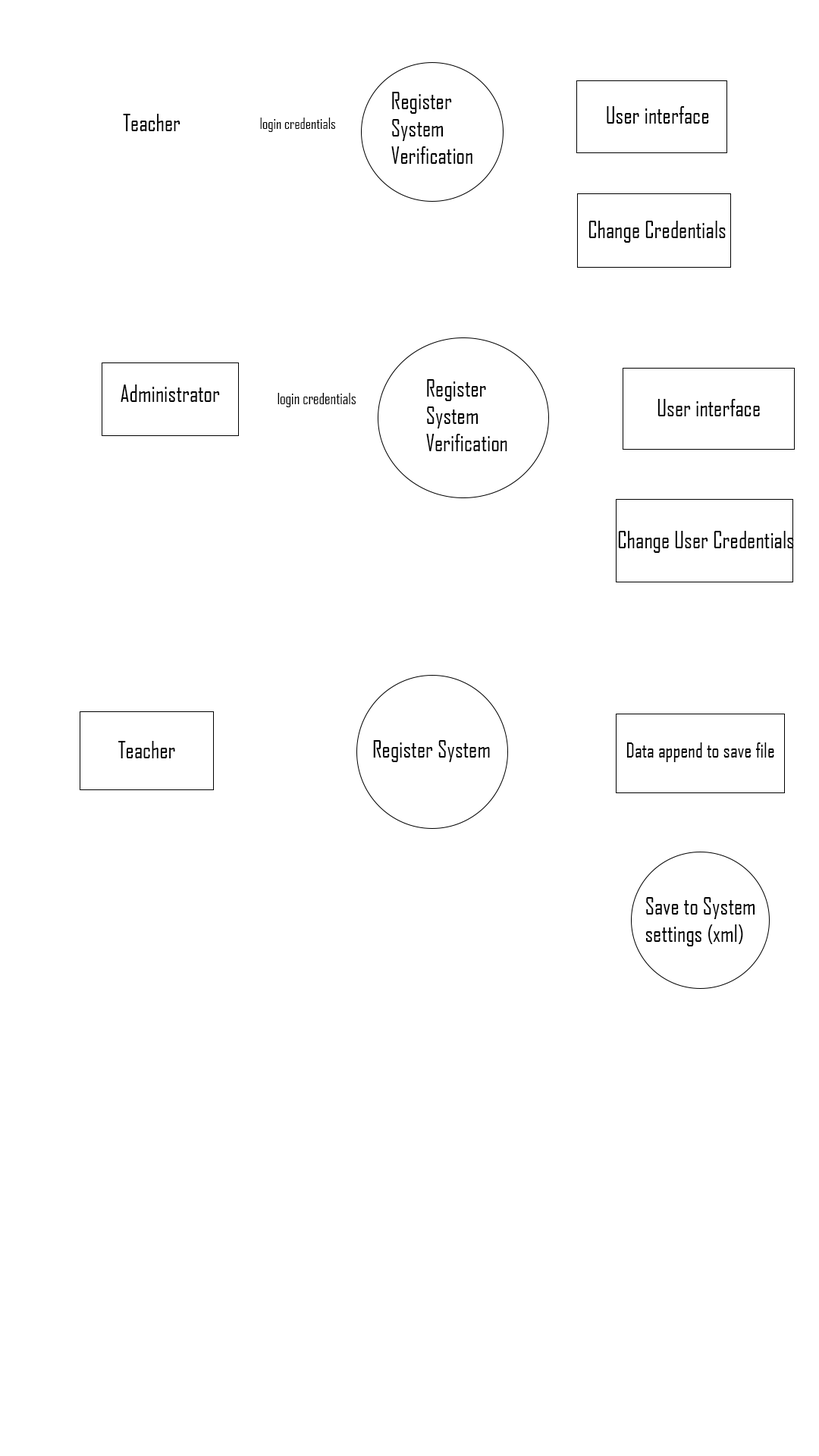
<style>
.page{position:relative;width:819px;height:1456px;background:#ffffff}
.page>*{position:absolute;margin:0}
.t1{font:22.7px "AgencyFB-Reg";color:#000000}
.t2{font:14.6px "AgencyFB-Reg";color:#000000}
.t3{font:15.2px "AgencyFB-Reg";color:#000000}
.t4{font:19.7px "AgencyFB-Reg";color:#000000}
</style>
<div class="page">
<p class="t1" style="left:391px;top:92px;width:81px;height:72px">Register<br>System<br>Verification</p>
<p class="t1" style="left:123px;top:114px;width:57px;height:17px">Teacher</p>
<p class="t1" style="left:607px;top:106px;width:102px;height:18px">User interface</p>
<p class="t2" style="left:260px;top:118px;width:75px;height:14px">login credentials</p>
<p class="t1" style="left:588px;top:221px;width:138px;height:22px">Change Credentials</p>
<p class="t1" style="left:121px;top:384px;width:99px;height:18px">Administrator</p>
<p class="t1" style="left:426px;top:379px;width:81px;height:72px">Register<br>System<br>Verification</p>
<p class="t3" style="left:278px;top:393px;width:78px;height:14px">login credentials</p>
<p class="t1" style="left:657px;top:399px;width:103px;height:17px">User interface</p>
<p class="t1" style="left:618px;top:531px;width:176px;height:22px">Change User Credentials</p>
<p class="t1" style="left:118px;top:741px;width:57px;height:17px">Teacher</p>
<p class="t1" style="left:373px;top:740px;width:117px;height:22px">Register System</p>
<p class="t4" style="left:626px;top:742px;width:148px;height:20px">Data append to save file</p>
<p class="t1" style="left:645px;top:897px;width:110px;height:49px">Save to System<br>settings (xml)</p>
</div>
